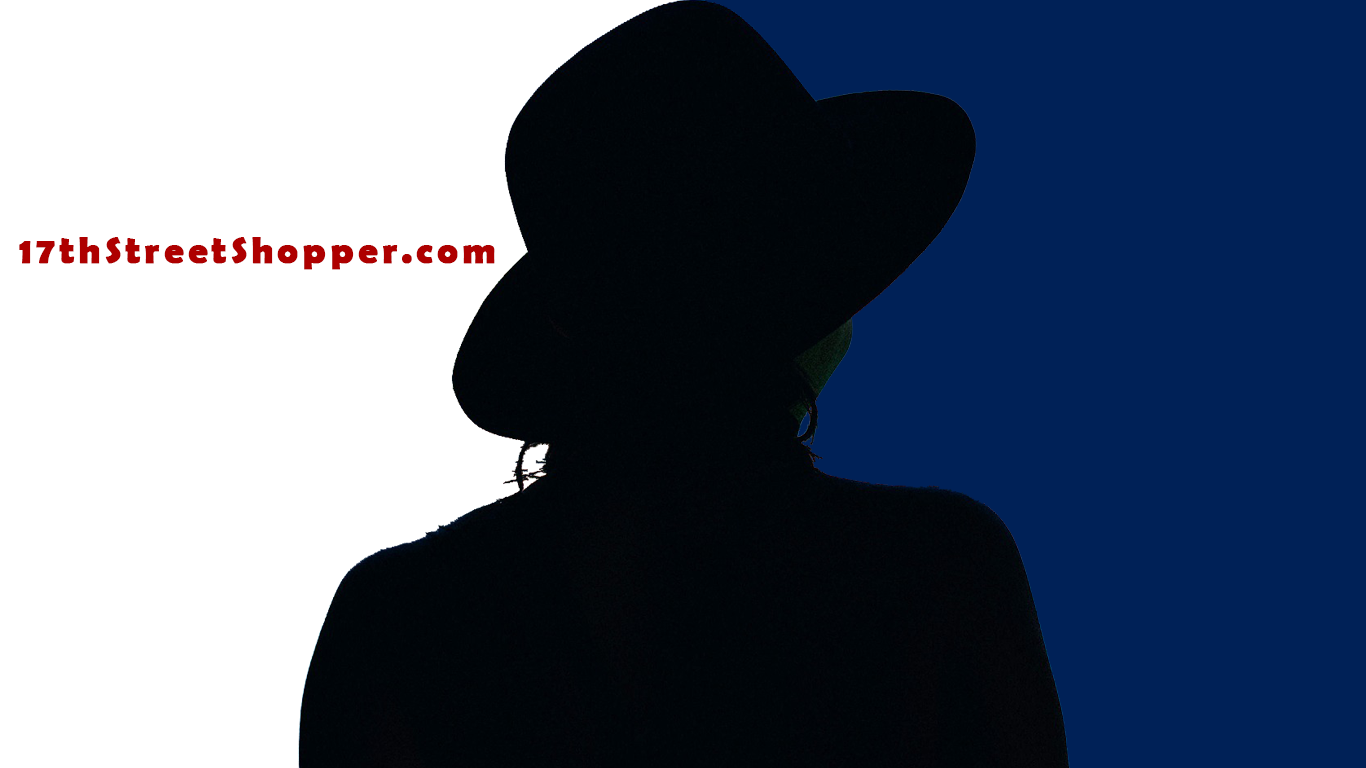
<style>
.page{position:relative;width:1366px;height:768px;background:#ffffff}
.page>*{position:absolute;margin:0}
.t1{font:38px "BerlinSansFBDemi-Bold";letter-spacing:0.1em;color:#ae0000;font-weight:bold}
</style>
<div class="page">
<p class="t1" style="left:19px;top:237px;width:476px;height:33px">17thStreetShopper.com</p>
</div>
